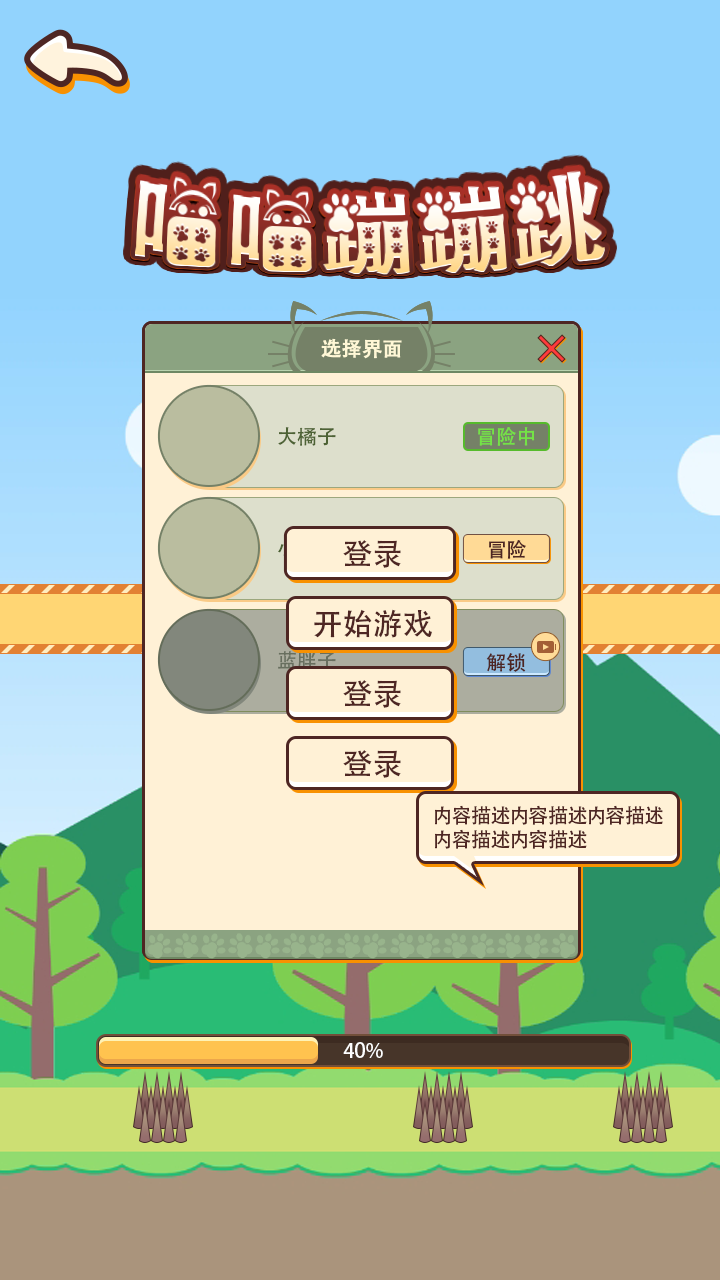
<style>
.page{position:relative;width:720px;height:1280px}
.page>*{position:absolute;margin:0}
.t1{font:20px "AdobeHeitiStd-Regular";color:#fff8d6;font-weight:bold}
.t2{font:20px "AdobeHeitiStd-Regular";color:#4d6234}
.t3{font:20px "AdobeHeitiStd-Regular";color:#74e346}
.t4{font:30px "AdobeHeitiStd-Regular";color:#4e2623}
.t5{font:20px "AdobeHeitiStd-Regular";color:#4e2623}
.t6{font:20px "AdobeHeitiStd-Regular";color:#686f5f}
.t7{font:20px/24px "AdobeHeitiStd-Regular";color:#4e2623}
.t8{font:20px "AdobeHeitiStd-Regular";color:#fefefe}
</style>
<div class="page">
<p class="t1" style="left:321px;top:338px;width:81px;height:21px">选择界面</p>
<p class="t2" style="left:278px;top:427px;width:58px;height:19px">大橘子</p>
<p class="t3" style="left:478px;top:427px;width:57px;height:19px">冒险中</p>
<p class="t4" style="left:343px;top:540px;width:58px;height:28px">登录</p>
<p class="t5" style="left:489px;top:540px;width:37px;height:19px">冒险</p>
<p class="t4" style="left:314px;top:609px;width:118px;height:29px">开始游戏</p>
<p class="t6" style="left:278px;top:651px;width:58px;height:19px">蓝胖子</p>
<p class="t5" style="left:486px;top:653px;width:40px;height:19px">解锁</p>
<p class="t4" style="left:343px;top:680px;width:58px;height:28px">登录</p>
<p class="t4" style="left:343px;top:750px;width:58px;height:28px">登录</p>
<p class="t7" style="left:435px;top:805px;width:228px;height:44px">内容描述内容描述内容描述<br>内容描述内容描述</p>
<p class="t8" style="left:343px;top:1042px;width:40px;height:16px">40%</p>
</div>
